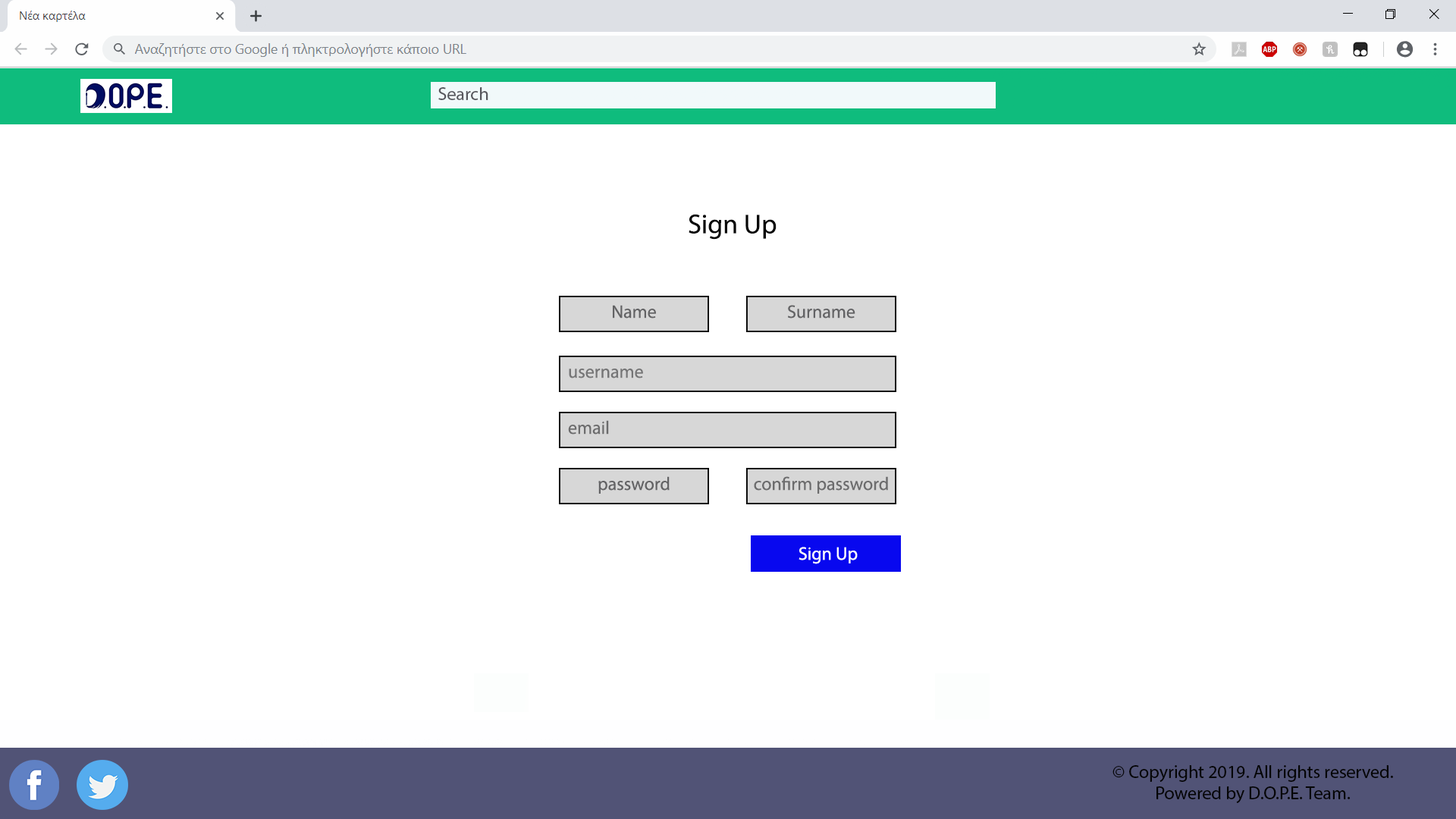
<style>
.page{position:relative;width:1456px;height:819px;background:#ffffff}
.page>*{position:absolute;margin:0}
.t1{font:18.2px "MyriadPro-Regular";color:#57575d}
.t2{font:27.3px "MyriadPro-Regular";color:#070707}
.t3{font:18.2px "MyriadPro-Regular";color:#636365}
.t4{font:18.2px "MyriadPro-Regular";color:#757576}
.t5{font:18.2px "MyriadPro-Regular";color:#6c6c6d}
.t6{font:18.2px "MyriadPro-Regular";color:#fcfcfd}
.t7{font:18.2px "MyriadPro-Regular";color:#050505}
</style>
<div class="page">
<p class="t1" style="left:438px;top:87px;width:50px;height:13px">Search</p>
<p class="t2" style="left:689px;top:214px;width:88px;height:26px">Sign Up</p>
<p class="t3" style="left:613px;top:305px;width:43px;height:13px">Name</p>
<p class="t3" style="left:788px;top:305px;width:67px;height:13px">Surname</p>
<p class="t4" style="left:569px;top:369px;width:74px;height:9px">username</p>
<p class="t5" style="left:568px;top:420px;width:41px;height:15px">email</p>
<p class="t3" style="left:598px;top:476px;width:72px;height:18px">password</p>
<p class="t5" style="left:754px;top:476px;width:134px;height:18px">confirm password</p>
<p class="t6" style="left:799px;top:547px;width:59px;height:17px">Sign Up</p>
<p class="t7" style="left:1112px;top:765px;width:281px;height:38px;text-align:center">© Copyright 2019. All rights reserved. Powered by D.O.P.E. Team.</p>
</div>
